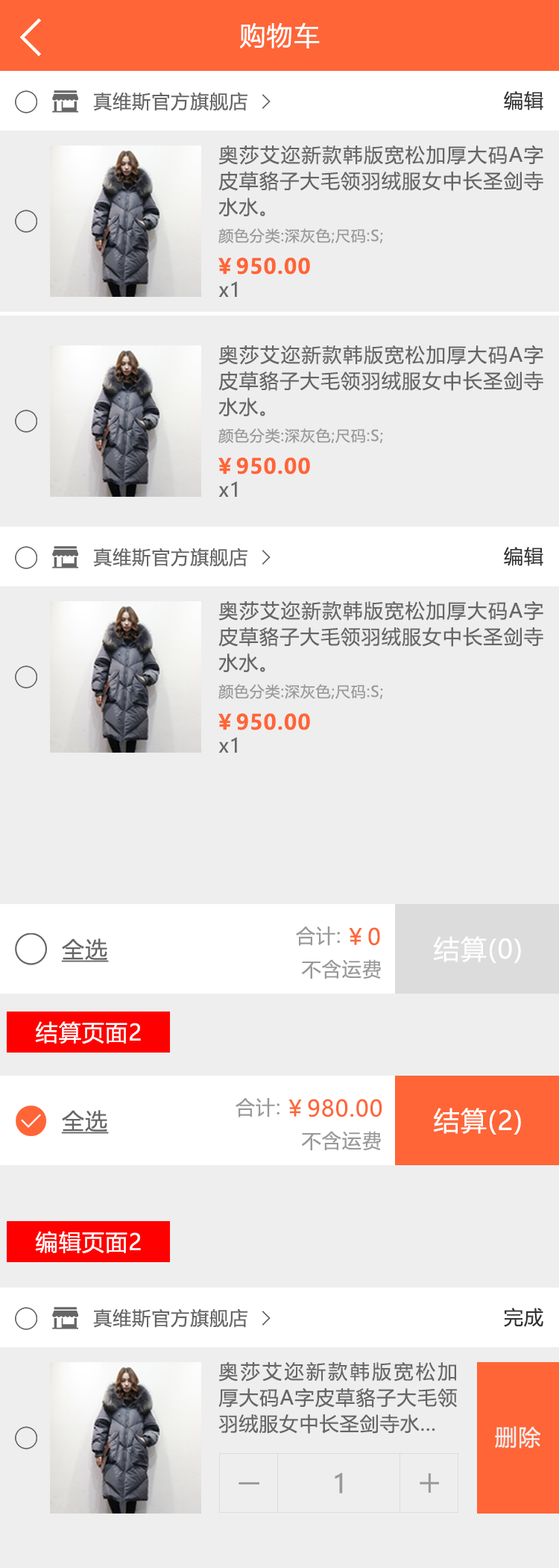
<style>
.page{position:relative;width:559px;height:1568px;background:#eeeeee}
.page>*{position:absolute;margin:0}
.t1{font:26.1px "MicrosoftYaHei";letter-spacing:0.04em;color:#ffffff}
.t2{font:18.6px "MicrosoftYaHei";letter-spacing:0.04em;color:#666666}
.t3{font:19.4px "MicrosoftYaHei";letter-spacing:0.04em;color:#333333}
.t4{font:19.4px/26.1px "MicrosoftYaHei";letter-spacing:0.04em;color:#666666}
.t5{font:14.9px "MicrosoftYaHei";letter-spacing:0.04em;color:#999999}
.t6{font:20.9px "MicrosoftYaHei-Bold";letter-spacing:0.04em;color:#ff6537}
.t7{font:19.4px "MicrosoftYaHei";letter-spacing:0.04em;color:#666666}
.t8{font:19.4px "MicrosoftYaHei";letter-spacing:0.04em;color:#999999}
.t9{font:22.4px "MicrosoftYaHei";letter-spacing:0.04em;color:#ff6537}
.t10{font:22.4px "MicrosoftYaHei";letter-spacing:0.04em;color:#666666;text-decoration:underline}
.t11{font:22.4px "MicrosoftYaHei";letter-spacing:0.04em;color:#ffffff}
.t12{font:26.1px "MicrosoftYaHei";letter-spacing:0.04em;color:#fefefe}
.t13{font:22.4px "MicrosoftYaHei";letter-spacing:0.04em;color:#eeeeee}
.t14{font:26.1px "MicrosoftYaHei";letter-spacing:0.04em;color:#999999}
</style>
<div class="page">
<p class="t1" style="left:239px;top:22px;width:81px;height:26px">购物车</p>
<p class="t2" style="left:93px;top:92px;width:155px;height:19px">真维斯官方旗舰店</p>
<p class="t3" style="left:504px;top:91px;width:40px;height:19px">编辑</p>
<p class="t4" style="left:219px;top:145px;width:325px;height:71px;text-align:justify">奥莎艾迩新款韩版宽松加厚大码A字皮草貉子大毛领羽绒服女中长圣剑寺水水。</p>
<p class="t5" style="left:219px;top:228px;width:164px;height:15px">颜色分类:深灰色;尺码:S;</p>
<p class="t6" style="left:219px;top:257px;width:91px;height:18px">￥950.00</p>
<p class="t7" style="left:219px;top:281px;width:18px;height:16px">x1</p>
<p class="t4" style="left:219px;top:345px;width:325px;height:71px;text-align:justify">奥莎艾迩新款韩版宽松加厚大码A字皮草貉子大毛领羽绒服女中长圣剑寺水水。</p>
<p class="t5" style="left:219px;top:428px;width:164px;height:15px">颜色分类:深灰色;尺码:S;</p>
<p class="t6" style="left:219px;top:457px;width:91px;height:17px">￥950.00</p>
<p class="t7" style="left:219px;top:481px;width:18px;height:16px">x1</p>
<p class="t2" style="left:93px;top:548px;width:155px;height:19px">真维斯官方旗舰店</p>
<p class="t3" style="left:504px;top:547px;width:40px;height:19px">编辑</p>
<p class="t4" style="left:219px;top:600px;width:325px;height:72px;text-align:justify">奥莎艾迩新款韩版宽松加厚大码A字皮草貉子大毛领羽绒服女中长圣剑寺水水。</p>
<p class="t5" style="left:219px;top:684px;width:164px;height:15px">颜色分类:深灰色;尺码:S;</p>
<p class="t6" style="left:219px;top:713px;width:91px;height:17px">￥950.00</p>
<p class="t7" style="left:219px;top:737px;width:18px;height:16px">x1</p>
<p class="t8" style="left:296px;top:926px;width:44px;height:20px">合计:</p>
<p class="t9" style="left:349px;top:927px;width:31px;height:19px">￥0</p>
<p class="t10" style="left:61px;top:938px;width:48px;height:24px">全选</p>
<p class="t1" style="left:433px;top:936px;width:88px;height:27px">结算(0)</p>
<p class="t8" style="left:301px;top:959px;width:80px;height:20px">不含运费</p>
<p class="t11" style="left:35px;top:1021px;width:106px;height:23px">结算页面2</p>
<p class="t10" style="left:61px;top:1110px;width:48px;height:24px">全选</p>
<p class="t8" style="left:236px;top:1098px;width:44px;height:19px">合计:</p>
<p class="t9" style="left:289px;top:1099px;width:94px;height:18px">￥980.00</p>
<p class="t12" style="left:433px;top:1108px;width:88px;height:27px">结算(2)</p>
<p class="t8" style="left:301px;top:1131px;width:80px;height:19px">不含运费</p>
<p class="t11" style="left:35px;top:1231px;width:106px;height:23px">编辑页面2</p>
<p class="t2" style="left:93px;top:1308px;width:155px;height:20px">真维斯官方旗舰店</p>
<p class="t3" style="left:504px;top:1308px;width:40px;height:19px">完成</p>
<p class="t4" style="left:219px;top:1362px;width:238px;height:72px;text-align:justify">奥莎艾迩新款韩版宽松加厚大码A字皮草貉子大毛领羽绒服女中长圣剑寺水...</p>
<p class="t13" style="left:495px;top:1426px;width:47px;height:23px">删除</p>
<p class="t14" style="left:335px;top:1473px;width:8px;height:20px">1</p>
</div>
